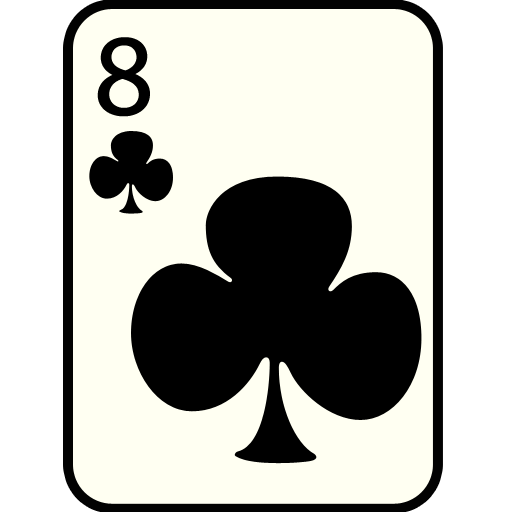
<style>
.page{position:relative;width:512px;height:512px;background:#fffff2}
.page>*{position:absolute;margin:0}
.t1{font:200px "MyriadPro-Regular";letter-spacing:-0.05em;color:#000000;font-variant:small-caps;font-weight:bold}
</style>
<div class="page">
<p class="t1" style="left:97px;top:37px;width:53px;height:80px">8</p>
</div>
